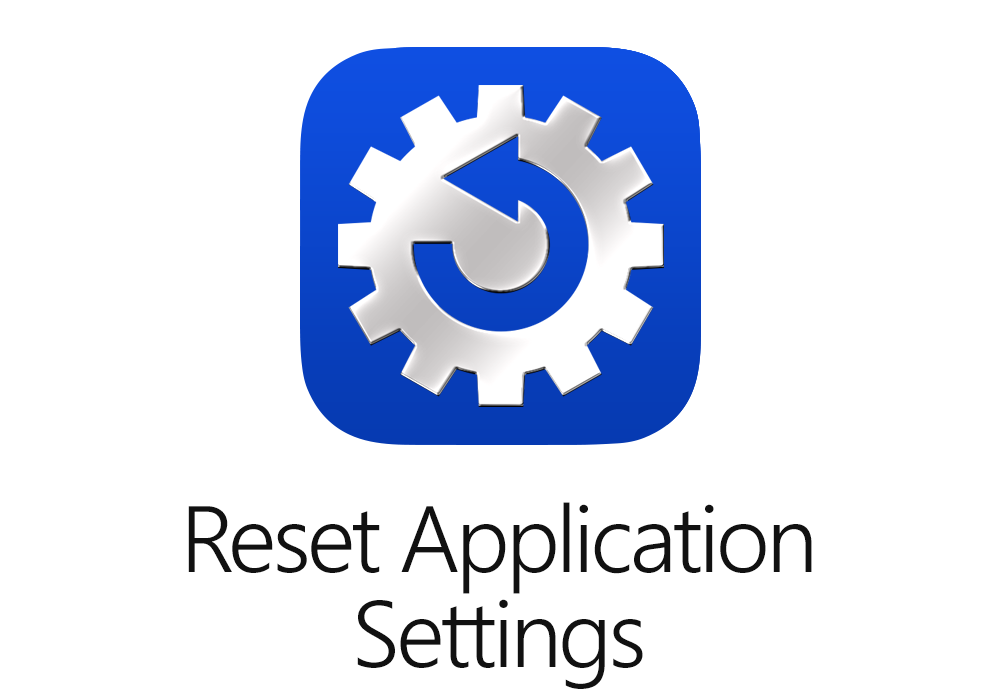
<style>
.page{position:relative;width:1000px;height:700px;background:#ffffff}
.page>*{position:absolute;margin:0}
.t1{font:94px/95px "SegoeUI-Semilight";letter-spacing:-0.04em;color:#111111}
</style>
<div class="page">
<p class="t1" style="left:188px;top:502px;width:624px;height:187px;text-align:center">Reset Application<br>Settings</p>
</div>
